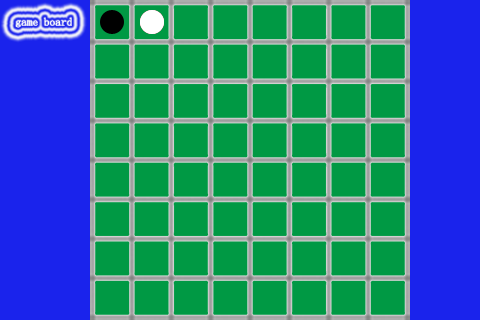
<style>
.page{position:relative;width:480px;height:320px;background:#009944}
.page>*{position:absolute;margin:0}
.t1{font:11.4px "YouYuan";color:#ffffff}
</style>
<div class="page">
<p class="t1" style="left:16px;top:17px;width:56px;height:11px">game board</p>
</div>
